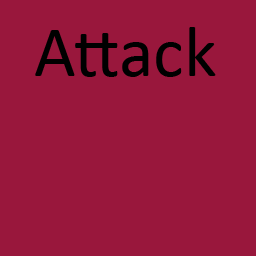
<style>
.page{position:relative;width:256px;height:256px;background:#99173c}
.page>*{position:absolute;margin:0}
.t1{font:72px "Calibri";color:#000000}
</style>
<div class="page">
<p class="t1" style="left:35px;top:27px;width:181px;height:50px">Attack</p>
</div>
